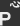
<style>
.page{position:relative;width:20px;height:26px;background:#333333}
.page>*{position:absolute;margin:0}
.t1{font:12px "DFKaiShu-SB-Estd-BF";color:#ececec;font-weight:bold}
.t2{font:18px "ArialMT";color:#ececec;font-weight:bold}
</style>
<div class="page">
<p class="t1" style="left:10px;top:1px;width:10px;height:7px">心</p>
<p class="t2" style="left:0px;top:12px;width:11px;height:14px">P</p>
</div>
